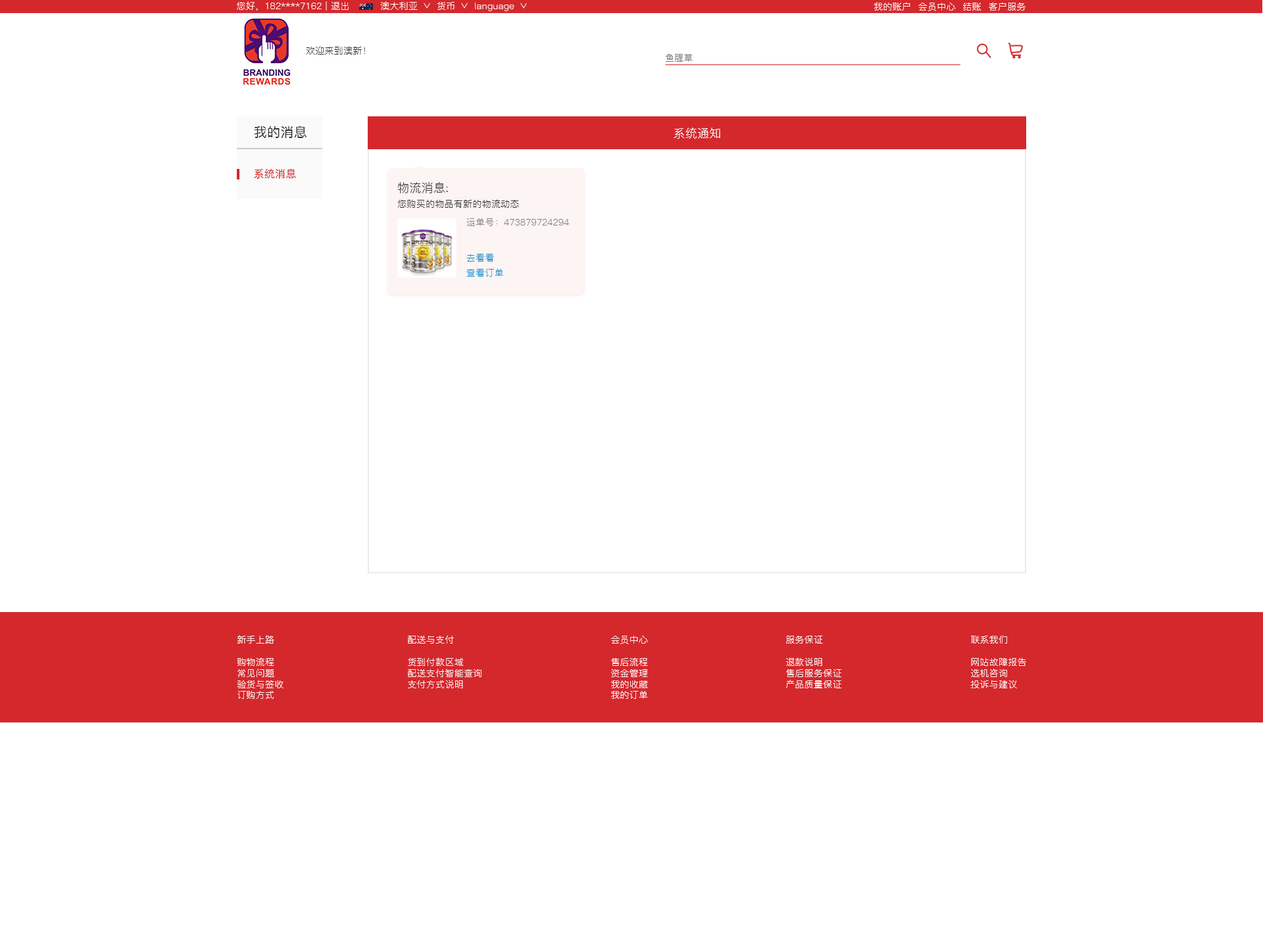
<style>
.page{position:relative;width:1263px;height:944px;background:#ffffff}
.page>*{position:absolute;margin:0}
.t1{font:9.2px "PingFang-SC-Regular";letter-spacing:0.02em;color:#ffffff}
.t2{font:9.2px "PingFang-SC-Regular";letter-spacing:0.02em;color:#333333}
.t3{font:9.2px "PingFang-SC-Regular";letter-spacing:0.02em;color:#767676}
.t4{font:13.2px "PingFang-SC-Medium";letter-spacing:0.02em;color:#333333}
.t5{font:11.8px "PingFang-SC-Regular";letter-spacing:0.02em;color:#ffffff}
.t6{font:10.5px "PingFang-SC-Medium";letter-spacing:0.02em;color:#d4282d}
.t7{font:11.8px "PingFang-SC-Regular";letter-spacing:0.02em;color:#333333}
.t8{font:9.2px "PingFang-SC-Regular";letter-spacing:0.02em;color:#808080}
.t9{font:9.2px "PingFang-SC-Regular";letter-spacing:0.02em;color:#148fcc}
.t10{font:9.2px "PingFang-SC-Regular";letter-spacing:0.02em;color:#fffefe}
</style>
<div class="page">
<p class="t1" style="left:237px;top:1px;width:112px;height:10px">您好，182****7162 | 退出</p>
<p class="t1" style="left:380px;top:1px;width:38px;height:9px">澳大利亚</p>
<p class="t1" style="left:437px;top:2px;width:17px;height:8px">货币</p>
<p class="t1" style="left:475px;top:3px;width:39px;height:8px">language</p>
<p class="t1" style="left:873px;top:2px;width:152px;height:9px">我的账户  会员中心  结账  客户服务</p>
<p class="t2" style="left:306px;top:46px;width:59px;height:9px">欢迎来到澳新！</p>
<p class="t3" style="left:665px;top:54px;width:27px;height:8px">鱼腥草</p>
<p class="t4" style="left:254px;top:126px;width:52px;height:12px">我的消息</p>
<p class="t5" style="left:673px;top:128px;width:47px;height:11px">系统通知</p>
<p class="t6" style="left:254px;top:169px;width:42px;height:10px">系统消息</p>
<p class="t7" style="left:397px;top:182px;width:51px;height:11px">物流消息:</p>
<p class="t2" style="left:397px;top:199px;width:122px;height:9px">您购买的物品有新的物流动态</p>
<p class="t8" style="left:466px;top:218px;width:103px;height:8px">运单号：473879724294</p>
<p class="t9" style="left:466px;top:254px;width:28px;height:8px">去看看</p>
<p class="t9" style="left:466px;top:269px;width:37px;height:8px">查看订单</p>
<p class="t10" style="left:237px;top:635px;width:46px;height:64px">新手上路<br><br>购物流程<br>常见问题<br>验货与签收<br>订购方式</p>
<p class="t10" style="left:408px;top:635px;width:73px;height:54px">配送与支付<br><br>货到付款区域<br>配送支付智能查询<br>支付方式说明</p>
<p class="t10" style="left:610px;top:636px;width:38px;height:63px">会员中心<br><br>售后流程<br>资金管理<br>我的收藏<br>我的订单</p>
<p class="t10" style="left:786px;top:636px;width:56px;height:53px">服务保证<br><br>退款说明<br>售后服务保证<br>产品质量保证</p>
<p class="t10" style="left:970px;top:636px;width:56px;height:53px">联系我们<br><br>网站故障报告<br>选机咨询<br>投诉与建议</p>
</div>
